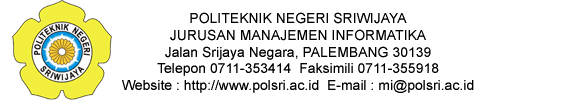
<style>
.page{position:relative;width:586px;height:101px;background:#ffffff}
.page>*{position:absolute;margin:0}
.t1{font:14px "ArialMT";color:#000000}
</style>
<div class="page">
<p class="t1" style="left:122px;top:12px;width:352px;height:81px;text-align:center">POLITEKNIK NEGERI SRIWIJAYA<br>JURUSAN MANAJEMEN INFORMATIKA<br>Jalan Srijaya Negara, PALEMBANG 30139<br>Telepon 0711-353414  Faksimili 0711-355918 <br>Website : http://www.polsri.ac.id  E-mail : mi@polsri.ac.id</p>
</div>
